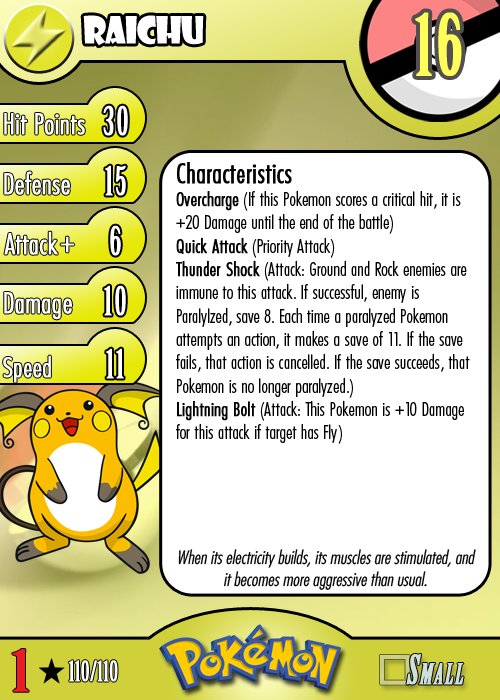
<style>
.page{position:relative;width:500px;height:700px;background:#ffffff}
.page>*{position:absolute;margin:0}
.t1{font:36.7px "ShowcardGothic-Reg";letter-spacing:-0.025em;color:#ffffff;scale:0.91 1}
.t2{font:83.3px "BirchStd";letter-spacing:0.025em;color:#fffd59;font-weight:bold}
.t3{font:27.8px "Futura-CondensedLight";color:#ffffff;font-weight:bold}
.t4{font:38.9px "BirchStd";letter-spacing:0.035em;color:#ffffff;font-weight:bold}
.t5{font:19.4px "FuturaCondensedBQ-Light";color:#010101}
.t6{font:27.8px "FuturaCondensedBQ-Light";color:#010101;font-weight:bold}
.t7{font:19.4px "FuturaCondensedBQ-Light";color:#010101;font-weight:bold}
.t8{font:30.6px "Futura-CondensedLight";color:#ffffff;font-weight:bold}
.t9{font:27.8px "FuturaCondensedBQ-Light";color:#ffffff;font-weight:bold}
.t10{font:18.1px "Futura-CondensedLight";color:#010101;font-style:italic}
.t11{font:55.6px "BirchStd";color:#ed1c24;font-weight:bold;scale:1.5 1}
.t12{font:27.8px "BirchStd";color:#ffffff;font-weight:bold}
</style>
<div class="page">
<p class="t1" style="left:83px;top:15px;width:121px;height:31px">raichu</p>
<p class="t2" style="left:415px;top:12px;width:47px;height:64px">16</p>
<p class="t3" style="left:4px;top:113px;width:81px;height:22px">Hit Points</p>
<p class="t4" style="left:103px;top:105px;width:25px;height:31px">30</p>
<p class="t3" style="left:4px;top:171px;width:66px;height:24px">Defense</p>
<p class="t4" style="left:105px;top:165px;width:21px;height:31px">15</p>
<p class="t5" style="left:176px;top:162px;width:294px;height:282px"><span class="t6">Characteristics<br></span><span class="t7">Overcharge</span> (If this Pokemon scores a critical hit, it is +20 Damage until the end of the battle)<br><span class="t7">Quick Attack</span> (Priority Attack)<br><span class="t7">Thunder Shock</span> (Attack: Ground and Rock enemies are immune to this attack. If successful, enemy is Paralylzed, save 8. Each time a paralyzed Pokemon attempts an action, it makes a save of 11. If the save fails, that action is cancelled. If the save succeeds, that Pokemon is no longer paralyzed.)<br><span class="t7">Lightning Bolt</span> (Attack: This Pokemon is +10 Damage for this attack if target has Fly)</p>
<p class="t3" style="left:4px;top:231px;width:54px;height:24px">Attack</p>
<p class="t4" style="left:110px;top:225px;width:11px;height:31px">6</p>
<p class="t8" style="left:60px;top:236px;width:14px;height:17px">+</p>
<p class="t3" style="left:4px;top:292px;width:68px;height:28px">Damage</p>
<p class="t4" style="left:104px;top:285px;width:22px;height:31px">10</p>
<p class="t4" style="left:106px;top:348px;width:18px;height:31px">11</p>
<p class="t9" style="left:3px;top:355px;width:48px;height:28px">Speed</p>
<p class="t10" style="left:178px;top:549px;width:298px;height:41px;text-align:center">When its electricity builds, its muscles are stimulated, and it becomes more aggressive than usual.</p>
<p class="t11" style="left:12px;top:649px;width:17px;height:43px">1</p>
<p class="t12" style="left:68px;top:660px;width:50px;height:22px">110/110</p>
</div>
